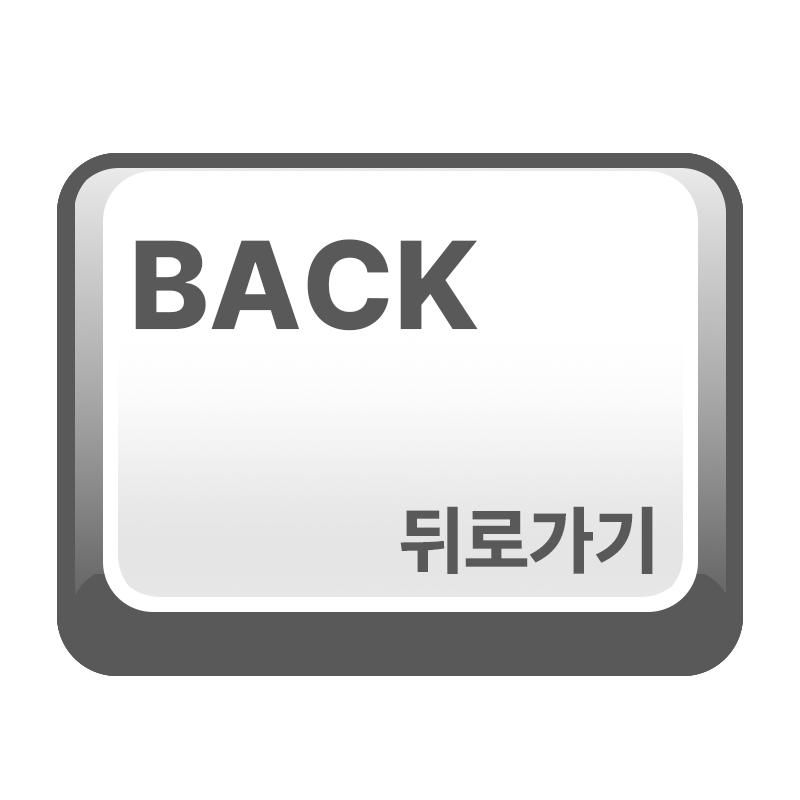
<style>
.page{position:relative;width:800px;height:800px;background:#ffffff}
.page>*{position:absolute;margin:0}
.t1{font:125px "Pretendard-ExtraBold";color:#595959}
.t2{font:75px "Pretendard-ExtraBold";color:#595959}
</style>
<div class="page">
<p class="t1" style="left:135px;top:239px;width:343px;height:92px">BACK</p>
<p class="t2" style="left:400px;top:506px;width:253px;height:68px">뒤로가기</p>
</div>
